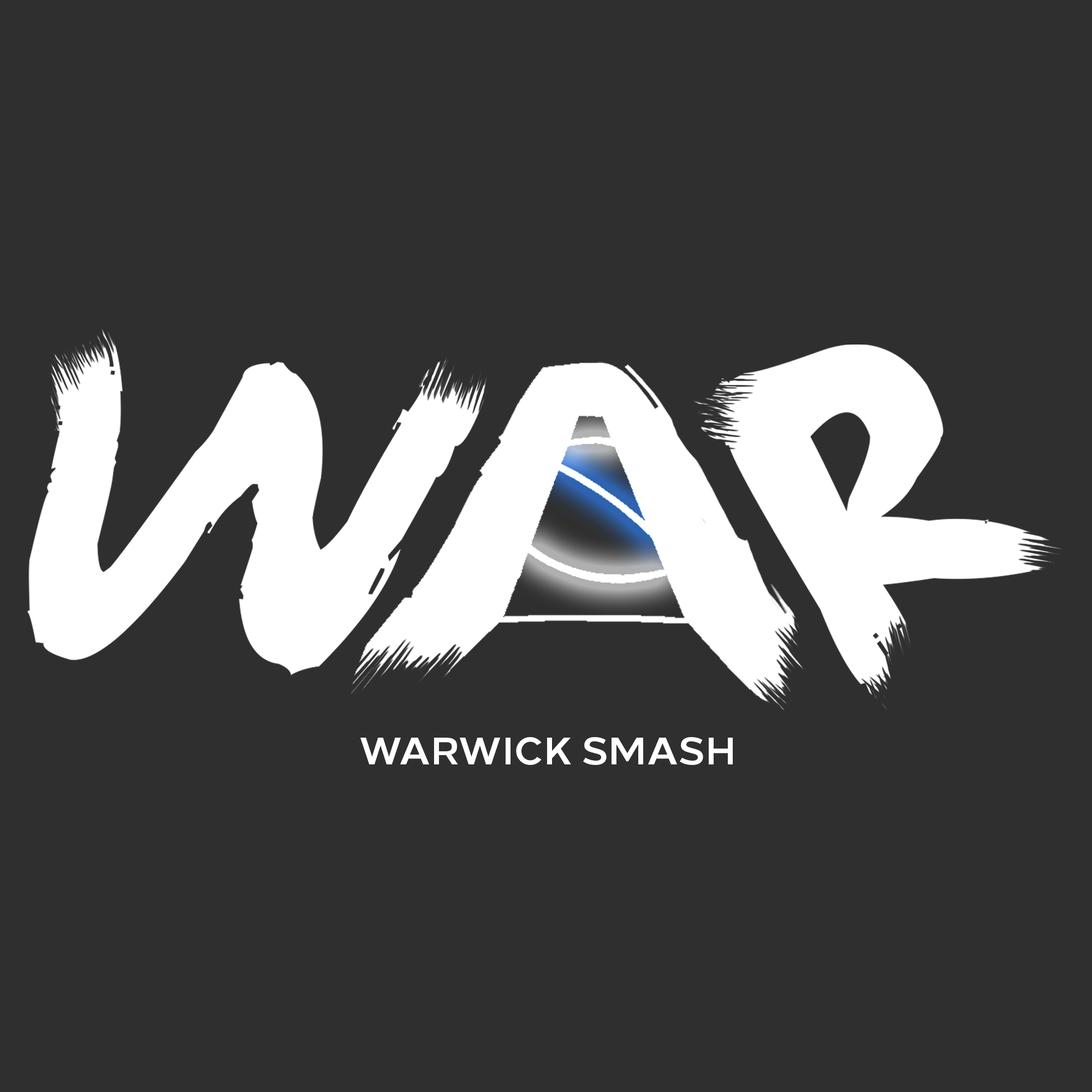
<style>
.page{position:relative;width:1092px;height:1092px;background:#2f2f2f}
.page>*{position:absolute;margin:0}
.t1{font:38px "Loew-Bold";color:#ffffff}
</style>
<div class="page">
<p class="t1" style="left:360px;top:737px;width:373px;height:28px">WARWICK SMASH</p>
</div>
